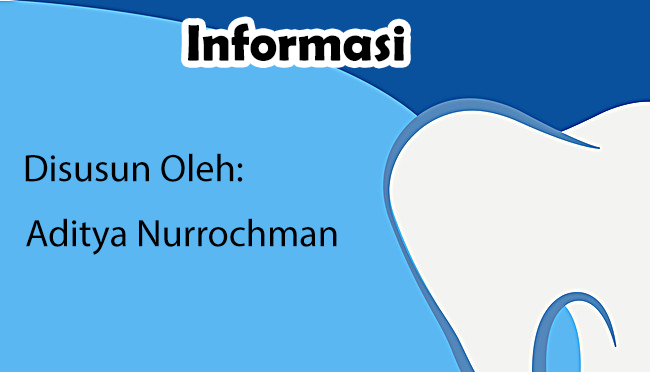
<style>
.page{position:relative;width:650px;height:372px;background:#5ab7f2}
.page>*{position:absolute;margin:0}
.t1{font:51.6px "BerlinSansFBDemi-Bold";color:#000000}
.t2{font:38.6px "BerlinSansFBDemi-Bold";color:#000000}
</style>
<div class="page">
<p class="t1" style="left:188px;top:23px;width:216px;height:39px">Informasi</p>
<p class="t2" style="left:25px;top:153px;width:218px;height:29px">Disusun Oleh:</p>
<p class="t2" style="left:26px;top:218px;width:311px;height:37px">Aditya Nurrochman</p>
</div>
